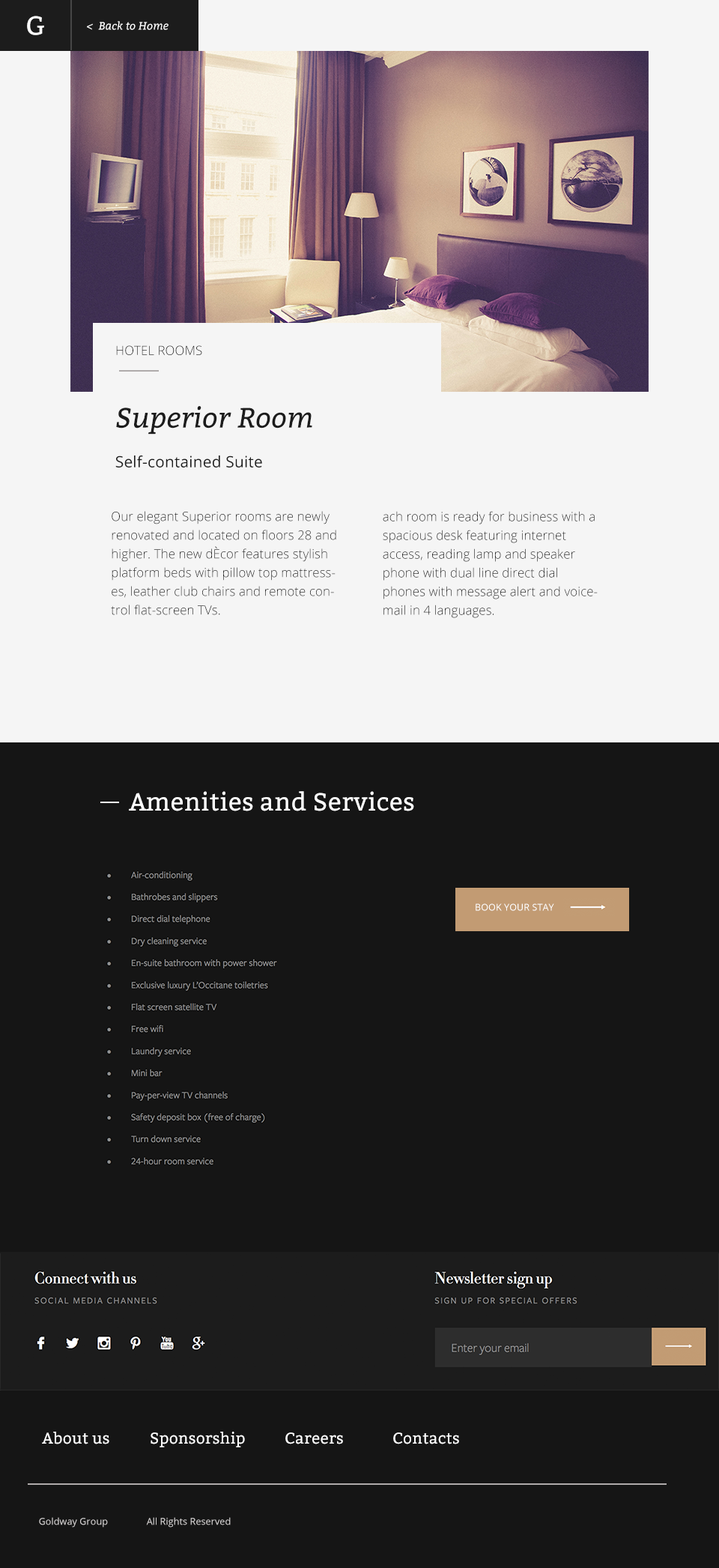
<style>
.page{position:relative;width:719px;height:1568px;background:#151515}
.page>*{position:absolute;margin:0}
.t1{font:25.9px "Bitter-Regular";letter-spacing:0.01em;color:#ffffff}
.t2{font:10.8px "Bitter-Italic";letter-spacing:0.01em;color:#ffffff}
.t3{font:12.5px "OpenSans-Light";letter-spacing:0.01em;color:#1c1c1c}
.t4{font:28.1px "Bitter-Italic";letter-spacing:0.01em;color:#1c1c1c}
.t5{font:15.6px "OpenSans";letter-spacing:0.01em;color:#1c1c1c}
.t6{font:12.5px/18.7px "OpenSans-Light";letter-spacing:0.01em;color:#1c1c1c}
.t7{font:25px "Bitter-Regular";letter-spacing:0.01em;color:#ffffff}
.t8{font:9.4px "OpenSans";letter-spacing:0.01em;color:#ffffff}
.t9{font:15.6px "Bitter-Regular";letter-spacing:0.01em;color:#ffffff}
.t10{font:9.4px "OpenSans";letter-spacing:0.01em;color:#d7d4d4}
</style>
<div class="page">
<p class="t1" style="left:27px;top:16px;width:17px;height:19px">G</p>
<p class="t2" style="left:87px;top:21px;width:82px;height:9px">&lt;  Back to Home</p>
<p class="t3" style="left:116px;top:345px;width:86px;height:10px">HOTEL ROOMS</p>
<p class="t4" style="left:116px;top:406px;width:196px;height:29px">Superior Room</p>
<p class="t5" style="left:115px;top:455px;width:147px;height:12px">Self-contained Suite</p>
<p class="t6" style="left:111px;top:511px;width:225px;height:104px">Our elegant Superior rooms are newly renovated and located on floors 28 and higher. The new dÈcor features stylish platform beds with pillow top mattresses, leather club chairs and remote control flat-screen TVs.</p>
<p class="t6" style="left:383px;top:511px;width:215px;height:107px">ach room is ready for business with a spacious desk featuring internet access, reading lamp and speaker phone with dual line direct dial phones with message alert and voicemail in 4 languages.</p>
<p class="t7" style="left:129px;top:791px;width:285px;height:20px">Amenities and Services</p>
<p class="t8" style="left:476px;top:903px;width:78px;height:8px">BOOK YOUR STAY</p>
<p class="t9" style="left:42px;top:1432px;width:417px;height:15px">About us  Sponsorship  Careers  Contacts</p>
<p class="t10" style="left:39px;top:1517px;width:192px;height:11px">Goldway Group  All Rights Reserved</p>
</div>
